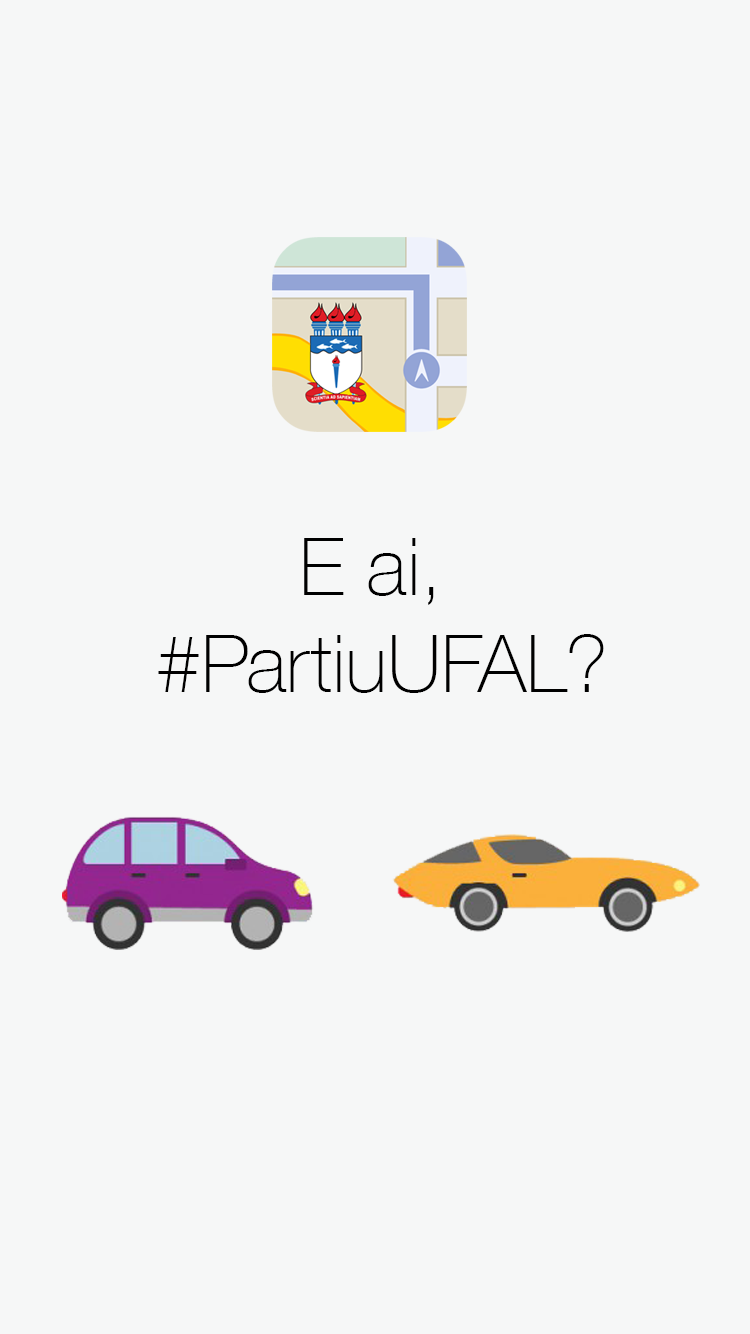
<style>
.page{position:relative;width:750px;height:1334px;background:#f6f7f7}
.page>*{position:absolute;margin:0}
.t1{font:80.5px "HelveticaNeue-Thin";color:#000000}
</style>
<div class="page">
<p class="t1" style="left:158px;top:538px;width:446px;height:155px;text-align:center">E ai, <br>#PartiuUFAL?</p>
</div>
